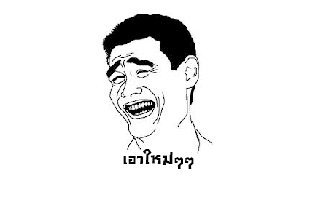
<style>
.page{position:relative;width:322px;height:222px;background:#ffffff}
.page>*{position:absolute;margin:0}
.t1{font:19.2px "-LayijiTaMaiTine1";color:#030303}
</style>
<div class="page">
<p class="t1" style="left:123px;top:149px;width:71px;height:20px">เอาใหม่ๆๆ</p>
</div>
